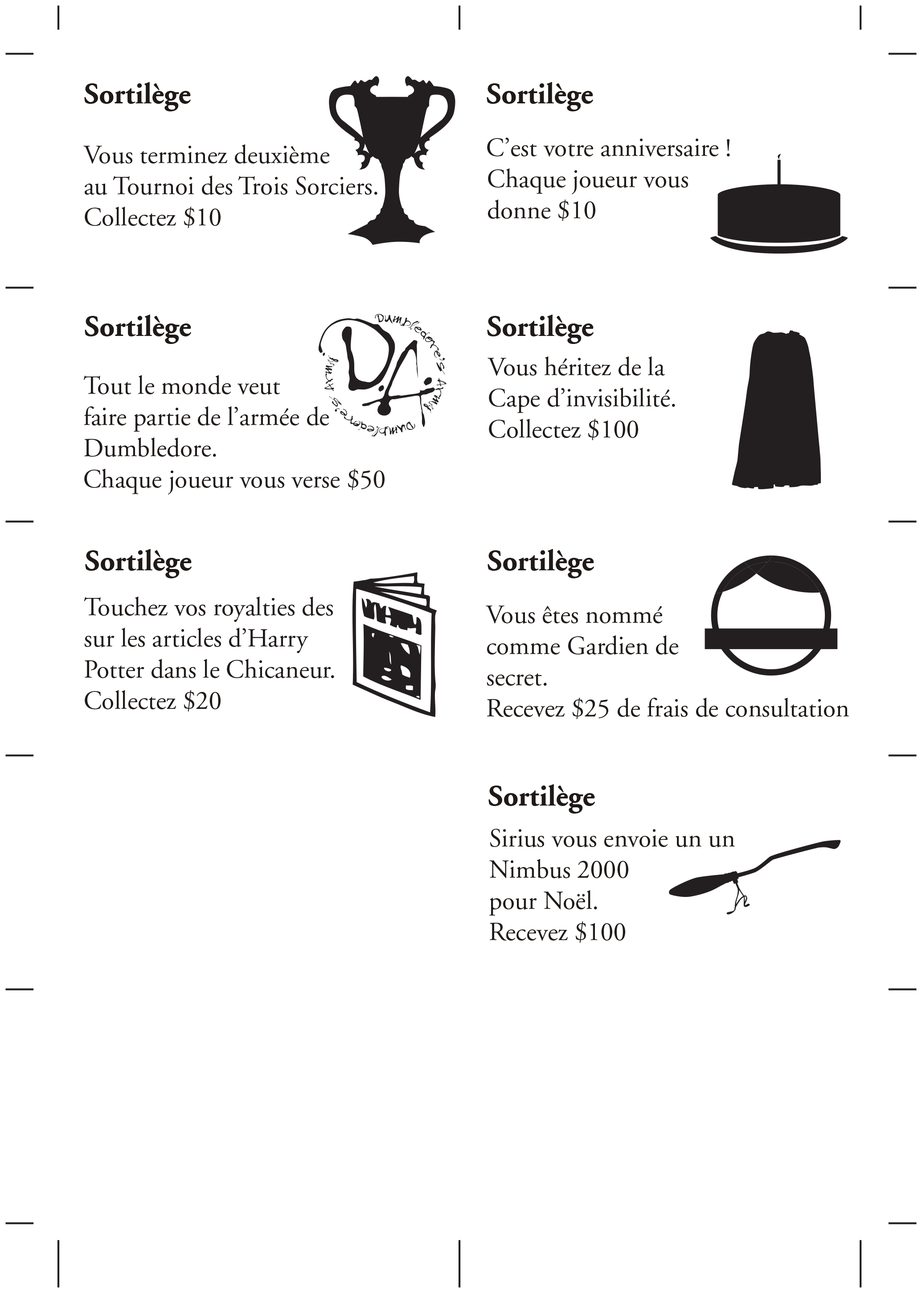
<style>
.page{position:relative;width:922px;height:1293px;background:#ffffff}
.page>*{position:absolute;margin:0}
.t1{font:29.7px "AGaramond-Bold";color:#1f1a17}
.t2{font:26px "AGaramond-Regular";color:#1f1a17}
</style>
<div class="page">
<p class="t1" style="left:84px;top:82px;width:107px;height:29px">Sortilège</p>
<p class="t1" style="left:487px;top:82px;width:106px;height:29px">Sortilège</p>
<p class="t2" style="left:487px;top:138px;width:243px;height:83px">C’est votre anniversaire !<br>Chaque joueur vous<br>donne $10</p>
<p class="t2" style="left:83px;top:144px;width:294px;height:84px">Vous terminez deuxième<br>au Tournoi des Trois Sorciers.<br>Collectez $10</p>
<p class="t1" style="left:85px;top:315px;width:106px;height:29px">Sortilège</p>
<p class="t1" style="left:487px;top:315px;width:107px;height:29px">Sortilège</p>
<p class="t2" style="left:488px;top:357px;width:187px;height:83px">Vous héritez de la<br>Cape d’invisibilité.<br>Collectez $100</p>
<p class="t2" style="left:83px;top:375px;width:302px;height:120px">Tout le monde veut<br>faire partie de l’armée de<br>Dumbledore.<br>Chaque joueur vous verse $50</p>
<p class="t1" style="left:85px;top:549px;width:107px;height:29px">Sortilège</p>
<p class="t1" style="left:488px;top:549px;width:106px;height:29px">Sortilège</p>
<p class="t2" style="left:84px;top:597px;width:250px;height:115px">Touchez vos royalties des<br>sur les articles d’Harry<br>Potter dans le Chicaneur.<br>Collectez $20</p>
<p class="t2" style="left:486px;top:606px;width:363px;height:113px">Vous êtes nommé<br>comme Gardien de<br>secret.<br>Recevez $25 de frais de consultation</p>
<p class="t1" style="left:488px;top:784px;width:107px;height:30px">Sortilège</p>
<p class="t2" style="left:489px;top:829px;width:246px;height:114px">Sirius vous envoie un un<br>Nimbus 2000<br>pour Noël.<br>Recevez $100</p>
</div>
